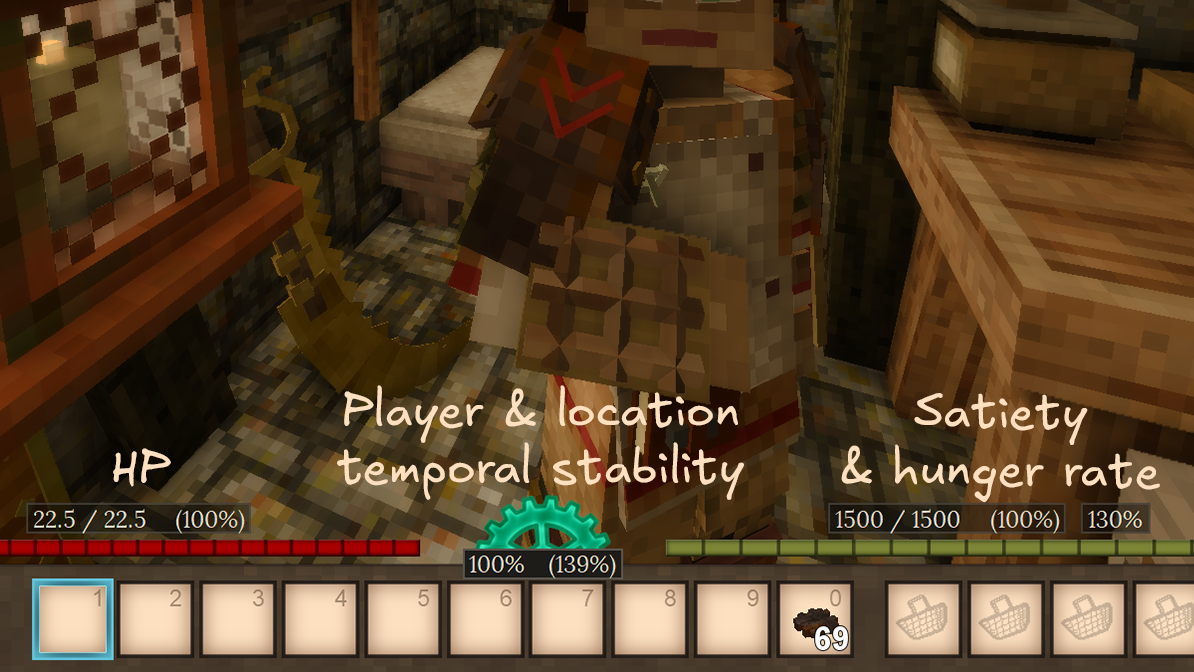
<style>
.page{position:relative;width:1194px;height:672px}
.page>*{position:absolute;margin:0}
.t1{font:48px "Excalifont-Regular";color:#fde0c0}
</style>
<div class="page">
<p class="t1" style="left:337px;top:385px;width:407px;height:115px;text-align:center">Player &amp; location<br>temporal stability</p>
<p class="t1" style="left:841px;top:393px;width:319px;height:110px;text-align:center;rotate:1deg">Satiety<br>&amp; hunger rate</p>
<p class="t1" style="left:113px;top:448px;width:58px;height:39px;rotate:1deg">HP</p>
</div>
